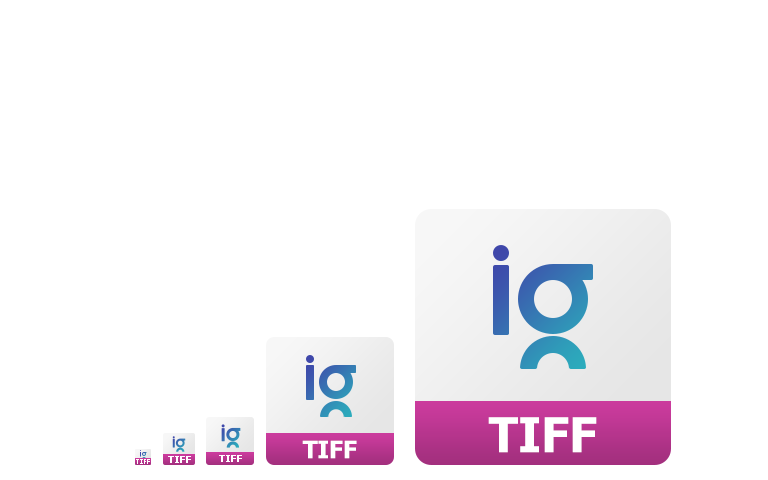
<style>
.page{position:relative;width:768px;height:480px;background:#ffffff}
.page>*{position:absolute;margin:0}
.t1{font:48px "Tahoma-Bold";color:#ffffff}
.t2{font:24px "Tahoma-Bold";color:#ffffff}
.t3{font:10px "Tahoma-Bold";color:#ffffff}
</style>
<div class="page">
<p class="t1" style="left:488px;top:417px;width:109px;height:36px">TIFF</p>
<p class="t2" style="left:302px;top:440px;width:55px;height:19px">TIFF</p>
<p class="t3" style="left:168px;top:456px;width:23px;height:7px">TIFF</p>
<p class="t3" style="left:219px;top:455px;width:23px;height:7px">TIFF</p>
</div>
